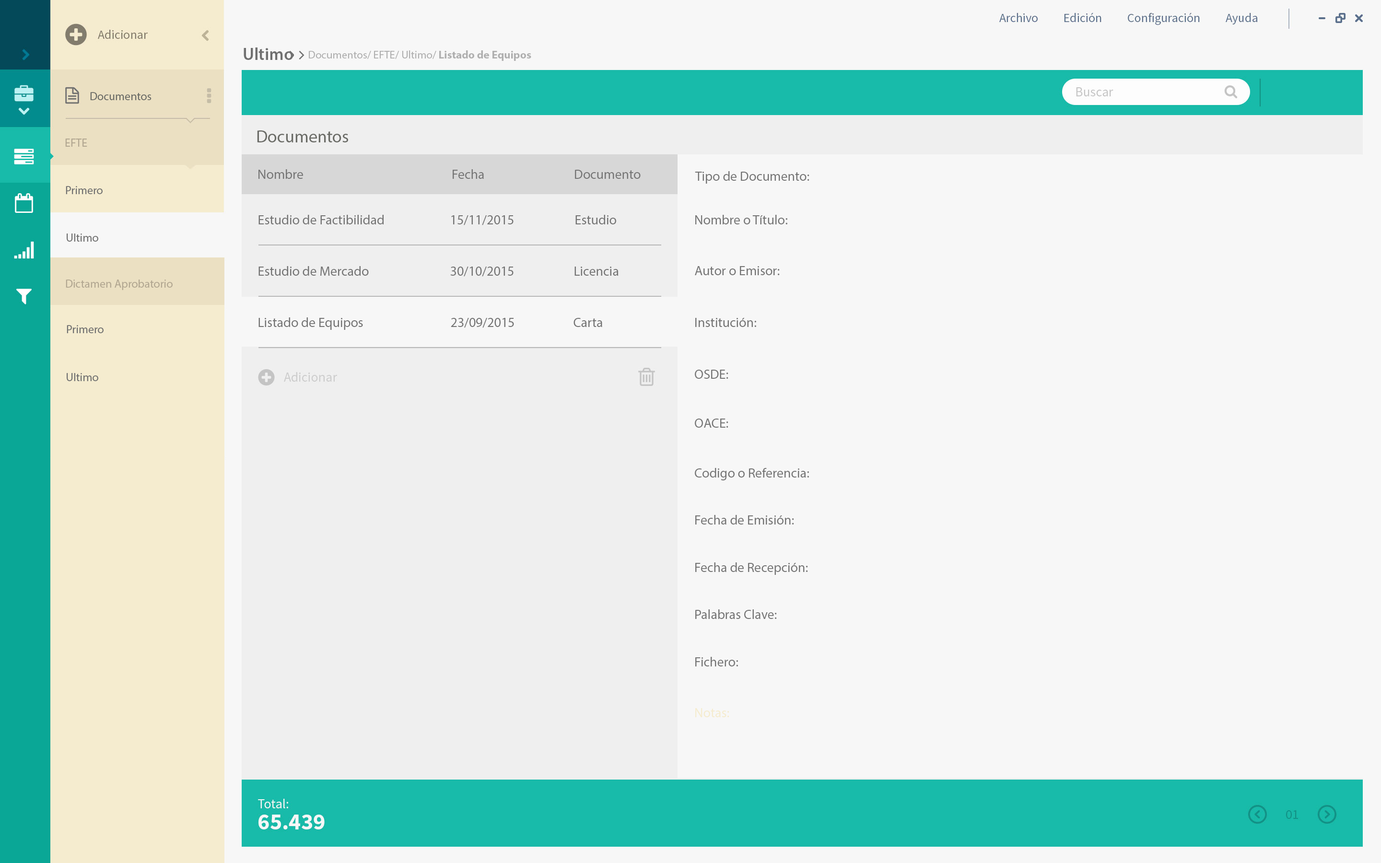
<style>
.page{position:relative;width:1381px;height:863px;background:#f7f7f7}
.page>*{position:absolute;margin:0}
.t1{font:17.3px "MyriadPro-Semibold";color:#707070}
.t2{font:11px "MyriadPro-Regular";color:#afafaf}
.t3{font:11px "MyriadPro-Bold";color:#afafaf}
.t4{font:11.5px "MyriadPro-Regular";color:#6a6b66}
.t5{font:17.3px "MyriadPro-Regular";color:#6a6b66}
.t6{font:11.5px "MyriadPro-Regular";color:#b2a791}
.t7{font:13.4px "MyriadPro-Regular";color:#757575}
.t8{font:11.5px "MyriadPro-Regular";color:#707070}
.t9{font:13.4px "MyriadPro-Regular";color:#747474}
.t10{font:13.4px "MyriadPro-Regular";color:#f5eccf}
</style>
<div class="page">
<p class="t1" style="left:244px;top:47px;width:49px;height:13px">Ultimo</p>
<p class="t2" style="left:309px;top:50px;width:222px;height:11px">Documentos/ EFTE/ Ultimo/<span class="t3"> Listado de Equipos</span></p>
<p class="t4" style="left:90px;top:92px;width:62px;height:8px">Documentos</p>
<p class="t5" style="left:257px;top:130px;width:91px;height:12px">Documentos</p>
<p class="t6" style="left:65px;top:139px;width:22px;height:8px">EFTE</p>
<p class="t7" style="left:259px;top:169px;width:44px;height:10px">Nombre</p>
<p class="t7" style="left:453px;top:169px;width:31px;height:10px">Fecha</p>
<p class="t7" style="left:575px;top:170px;width:66px;height:9px">Documento</p>
<p class="t7" style="left:695px;top:171px;width:115px;height:13px">Tipo de Documento:</p>
<p class="t8" style="left:66px;top:186px;width:37px;height:8px">Primero</p>
<p class="t9" style="left:259px;top:215px;width:125px;height:9px">Estudio de Factibilidad</p>
<p class="t9" style="left:451px;top:215px;width:63px;height:10px">15/11/2015</p>
<p class="t9" style="left:576px;top:215px;width:40px;height:9px">Estudio</p>
<p class="t7" style="left:695px;top:215px;width:93px;height:9px">Nombre o Título:</p>
<p class="t8" style="left:67px;top:234px;width:31px;height:8px">Ultimo</p>
<p class="t9" style="left:259px;top:266px;width:110px;height:10px">Estudio de Mercado</p>
<p class="t9" style="left:450px;top:267px;width:64px;height:10px">30/10/2015</p>
<p class="t9" style="left:575px;top:267px;width:44px;height:9px">Licencia</p>
<p class="t7" style="left:695px;top:266px;width:85px;height:9px">Autor o Emisor:</p>
<p class="t6" style="left:66px;top:280px;width:107px;height:10px">Dictamen Aprobatorio</p>
<p class="t9" style="left:259px;top:317px;width:104px;height:13px">Listado de Equipos</p>
<p class="t9" style="left:451px;top:318px;width:63px;height:10px">23/09/2015</p>
<p class="t9" style="left:574px;top:318px;width:28px;height:9px">Carta</p>
<p class="t7" style="left:695px;top:318px;width:61px;height:9px">Institución:</p>
<p class="t8" style="left:67px;top:325px;width:37px;height:8px">Primero</p>
<p class="t8" style="left:67px;top:373px;width:31px;height:8px">Ultimo</p>
<p class="t7" style="left:695px;top:370px;width:34px;height:9px">OSDE:</p>
<p class="t7" style="left:695px;top:419px;width:34px;height:9px">OACE:</p>
<p class="t7" style="left:695px;top:468px;width:114px;height:13px">Codigo o Referencia:</p>
<p class="t7" style="left:695px;top:515px;width:99px;height:10px">Fecha de Emisión:</p>
<p class="t7" style="left:695px;top:563px;width:113px;height:12px">Fecha de Recepción:</p>
<p class="t7" style="left:695px;top:610px;width:82px;height:9px">Palabras Clave:</p>
<p class="t7" style="left:695px;top:657px;width:43px;height:10px">Fichero:</p>
<p class="t10" style="left:695px;top:708px;width:34px;height:9px">Notas:</p>
</div>
